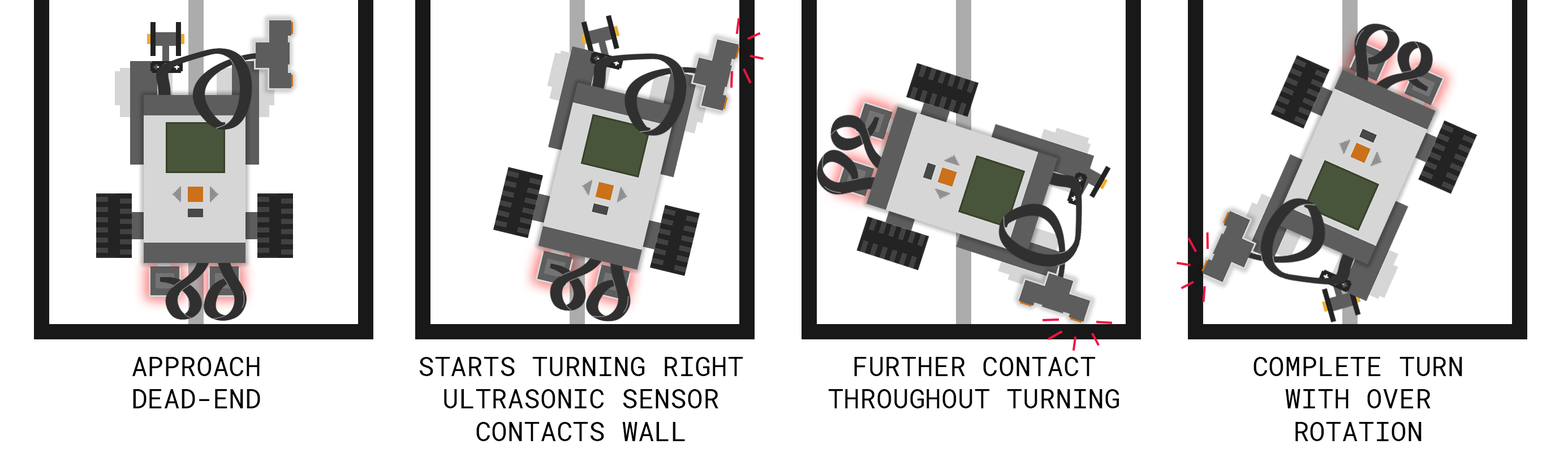
<style>
.page{position:relative;width:1568px;height:470px;background:#ffffff}
.page>*{position:absolute;margin:0}
.t1{font:27.2px "RobotoMono-Regular";color:#000000}
</style>
<div class="page">
<p class="t1" style="left:132px;top:357px;width:128px;height:51px;text-align:center">APPROACH<br>DEAD-END</p>
<p class="t1" style="left:419px;top:357px;width:324px;height:84px;text-align:center">STARTS TURNING RIGHT<br>ULTRASONIC SENSOR<br>CONTACTS WALL</p>
<p class="t1" style="left:828px;top:357px;width:291px;height:51px;text-align:center">FURTHER CONTACT<br>THROUGHOUT TURNING</p>
<p class="t1" style="left:1253px;top:357px;width:209px;height:84px;text-align:center">COMPLETE TURN<br>WITH OVER<br>ROTATION</p>
</div>
